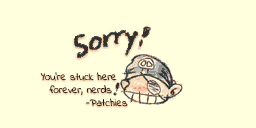
<style>
.page{position:relative;width:256px;height:128px;background:#ffffde}
.page>*{position:absolute;margin:0}
.t1{font:10.7px "IndieFlower";color:#313129}
</style>
<div class="page">
<p class="t1" style="left:40px;top:72px;width:88px;height:35px;text-align:center">You’re stuck here <br>   forever, nerds<br>                -Patchies</p>
</div>
